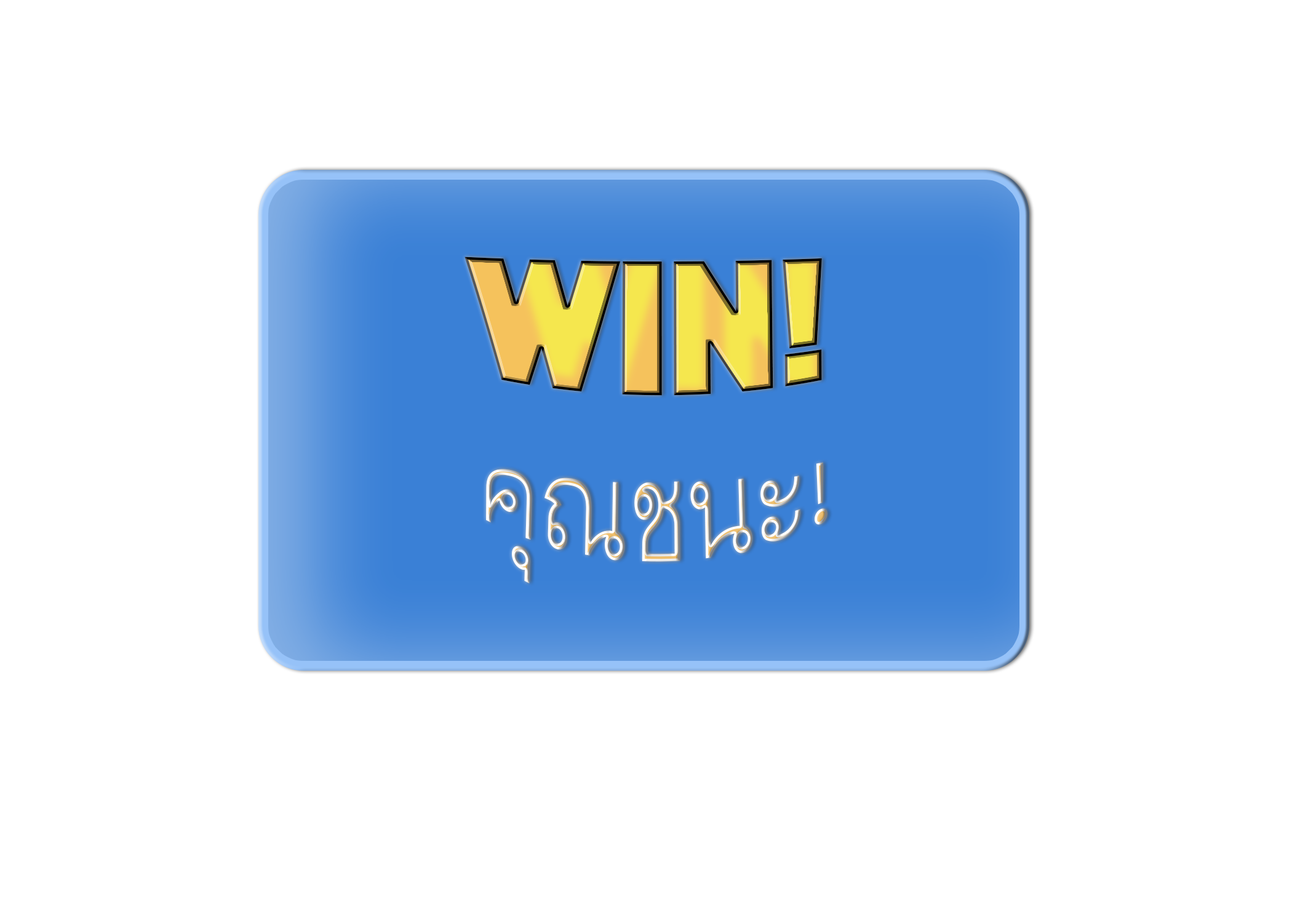
<style>
.page{position:relative;width:1292px;height:923px;background:#ffffff}
.page>*{position:absolute;margin:0}
.t1{font:171.7px "Phosphate-Solid";color:#f5d64f}
.t2{font:123.1px "TH-Chara"}
</style>
<div class="page">
<p class="t1" style="left:465px;top:257px;width:357px;height:139px">WIN!</p>
<p class="t2" style="left:486px;top:462px;width:342px;height:121px">คุณชนะ!</p>
</div>
